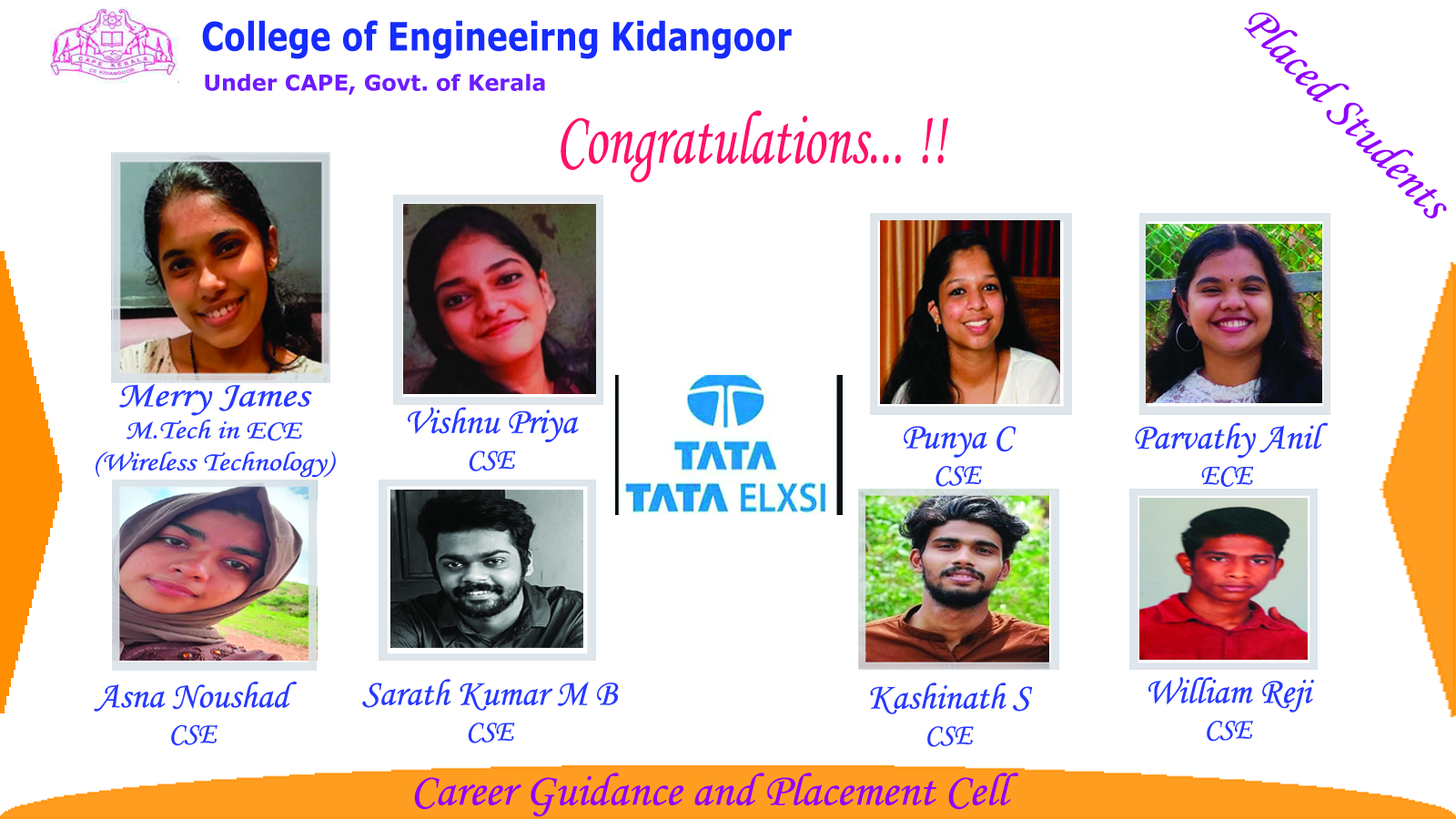
<style>
.page{position:relative;width:1456px;height:819px;background:#ffffff}
.page>*{position:absolute;margin:0}
.t1{font:48.5px "MonotypeCorsiva";color:#9100ff}
.t2{font:39.1px "Verdana-Bold";color:#162cff;scale:0.81 1}
.t3{font:21.8px "Verdana-Bold";color:#6e1bff}
.t4{font:75.6px "MonotypeCorsiva";color:#ff1069;scale:0.72 1}
.t5{font:26.7px "MonotypeCorsiva";color:#2639ff;scale:1.18 1}
.t6{font:36.1px "MonotypeCorsiva";color:#2639ff;scale:1.18 1}
.t7{font:37px "MonotypeCorsiva";color:#2639ff}
.t8{font:29.6px "MonotypeCorsiva";color:#2639ff}
.t9{font:46.1px "MonotypeCorsiva";color:#9100ff}
</style>
<div class="page">
<p class="t1" style="left:1244px;top:12px;width:203px;height:206px;rotate:46deg">Placed Students</p>
<p class="t2" style="left:202px;top:20px;width:590px;height:39px">College of Engineeirng Kidangoor</p>
<p class="t3" style="left:205px;top:74px;width:340px;height:21px">Under CAPE, Govt. of Kerala</p>
<p class="t4" style="left:561px;top:110px;width:387px;height:73px">Congratulations... !!</p>
<p class="t5" style="left:96px;top:383px;width:240px;height:95px;text-align:center"><span class="t6">Merry James<br></span>M.Tech in ECE<br>(Wireless Technology)</p>
<p class="t7" style="left:408px;top:407px;width:171px;height:64px;text-align:center">Vishnu Priya<br><span class="t8">CSE</span></p>
<p class="t7" style="left:904px;top:426px;width:112px;height:61px;text-align:center">Punya C<br><span class="t8">CSE</span></p>
<p class="t7" style="left:1135px;top:422px;width:193px;height:65px;text-align:center">Parvathy Anil<br><span class="t8">ECE</span></p>
<p class="t7" style="left:1148px;top:677px;width:166px;height:65px;text-align:center">William Reji<br><span class="t8">CSE</span></p>
<p class="t7" style="left:94px;top:682px;width:203px;height:64px;text-align:center">Asna Noushad<br><span class="t8">CSE</span></p>
<p class="t7" style="left:362px;top:679px;width:257px;height:64px;text-align:center">Sarath Kumar M B<br><span class="t8">CSE</span></p>
<p class="t7" style="left:870px;top:682px;width:163px;height:65px;text-align:center">Kashinath S<br><span class="t8">CSE</span></p>
<p class="t9" style="left:414px;top:773px;width:605px;height:44px">Career Guidance and Placement Cell</p>
</div>
